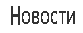
<style>
.page{position:relative;width:83px;height:33px;background:#ffffff}
.page>*{position:absolute;margin:0}
.t1{font:28.5px "Calibri";color:#323232;scale:0.67 1}
.t2{font:28.5px "Calibri";color:#323232;font-weight:bold;scale:0.67 1}
</style>
<div class="page">
<p class="t1" style="left:11px;top:6px;width:64px;height:19px"><span class="t2">Н</span>овости</p>
</div>
